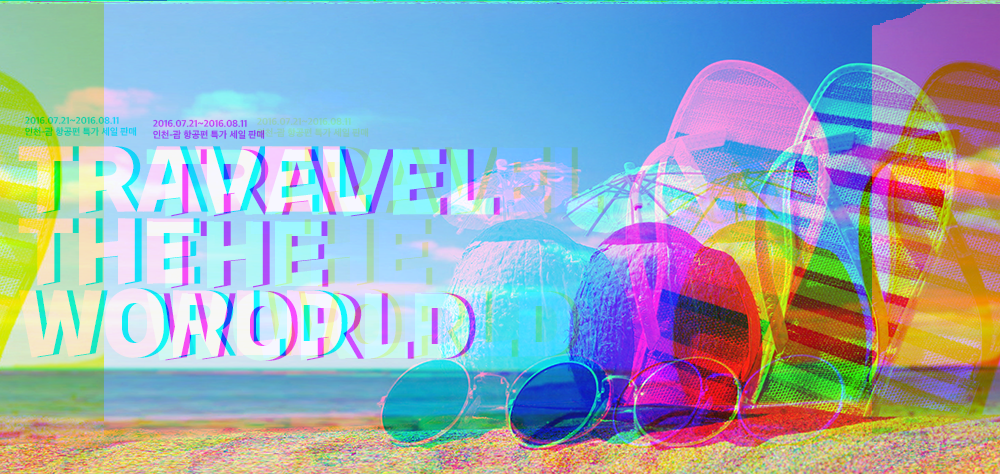
<style>
.page{position:relative;width:1000px;height:474px}
.page>*{position:absolute;margin:0}
.t1{font:79px/72px "RixYeoljeongdoPR"}
</style>
<div class="page">
<p class="t1" style="left:146px;top:145px;width:348px;height:212px">TRAVEL<br>THE<br>WORLD</p>
</div>
